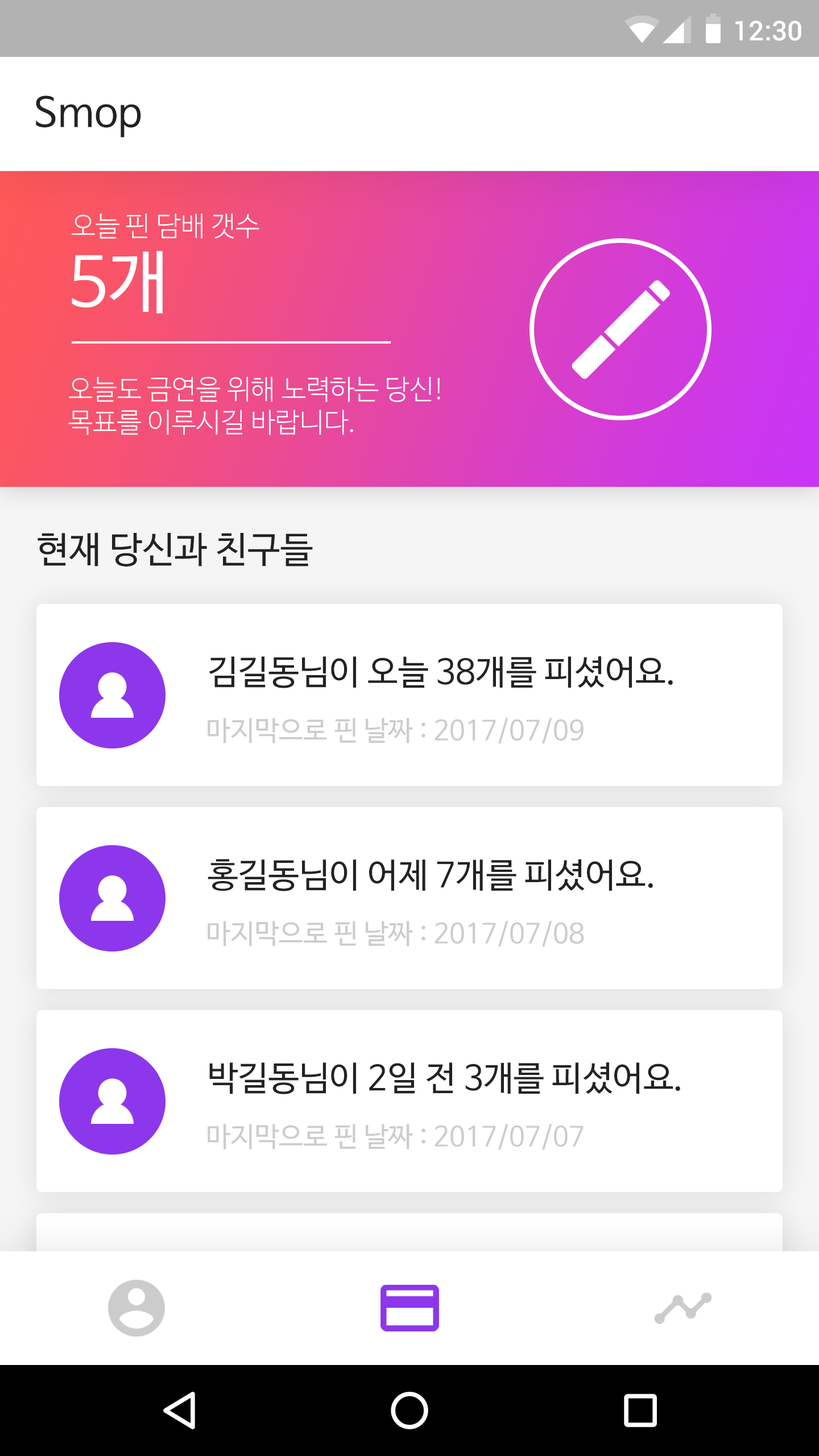
<style>
.page{position:relative;width:819px;height:1456px;background:#ffffff}
.page>*{position:absolute;margin:0}
.t1{font:27.3px "Roboto-Medium";color:#ffffff}
.t2{font:40.9px "NanumBarunGothic";color:#222222}
.t3{font:27.3px "NanumBarunGothicLight";color:#ffffff}
.t4{font:68.2px "NanumBarunGothic";color:#ffffff}
.t5{font:36.4px "NanumBarunGothic";color:#222222}
.t6{font:34.1px "NanumBarunGothic";color:#222222}
.t7{font:27.3px "NanumBarunGothic";color:#cccccc}
</style>
<div class="page">
<p class="t1" style="left:735px;top:20px;width:66px;height:21px">12:30</p>
<p class="t2" style="left:36px;top:96px;width:105px;height:42px">Smop</p>
<p class="t3" style="left:72px;top:213px;width:187px;height:26px">오늘 핀 담배 갯수</p>
<p class="t4" style="left:72px;top:251px;width:91px;height:62px">5개</p>
<p class="t3" style="left:68px;top:377px;width:372px;height:58px">오늘도 금연을 위해 노력하는 당신!<br>목표를 이루시길 바랍니다.</p>
<p class="t5" style="left:38px;top:532px;width:275px;height:34px">현재 당신과 친구들</p>
<p class="t6" style="left:209px;top:656px;width:464px;height:32px">김길동님이 오늘 38개를 피셨어요.</p>
<p class="t7" style="left:208px;top:718px;width:376px;height:26px">마지막으로 핀 날짜 : 2017/07/09</p>
<p class="t6" style="left:208px;top:859px;width:445px;height:32px">홍길동님이 어제 7개를 피셨어요.</p>
<p class="t7" style="left:208px;top:921px;width:376px;height:26px">마지막으로 핀 날짜 : 2017/07/08</p>
<p class="t6" style="left:209px;top:1062px;width:471px;height:32px">박길동님이 2일 전 3개를 피셨어요.</p>
<p class="t7" style="left:208px;top:1124px;width:376px;height:26px">마지막으로 핀 날짜 : 2017/07/07</p>
</div>
